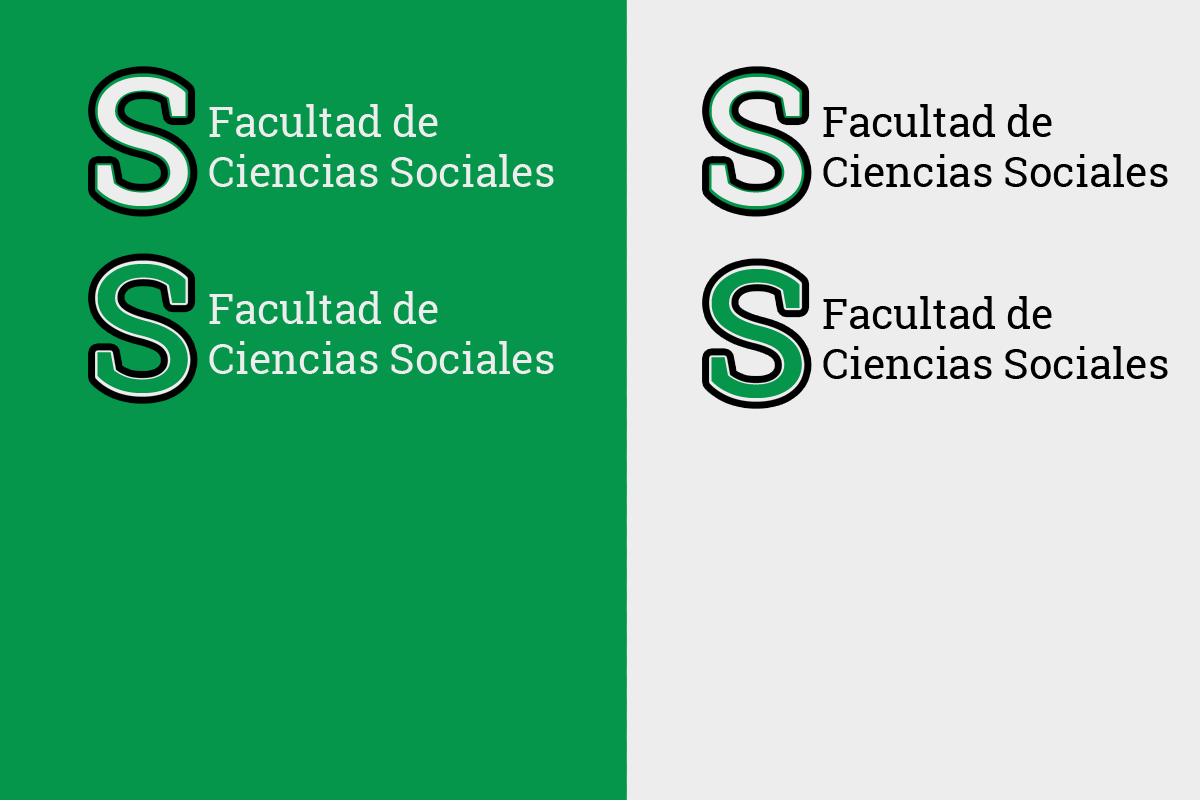
<style>
.page{position:relative;width:1200px;height:800px;background:#05954b}
.page>*{position:absolute;margin:0}
.t1{font:178.9px "RobotoSlab-Regular";color:#ededed}
.t2{font:41.9px "RobotoSlab-Regular";color:#ededed}
.t3{font:41.9px "RobotoSlab-Regular";color:#000000}
.t4{font:178.9px "RobotoSlab-Regular";color:#04954a}
</style>
<div class="page">
<p class="t1" style="left:97px;top:77px;width:91px;height:129px">S</p>
<p class="t1" style="left:711px;top:77px;width:91px;height:129px">S</p>
<p class="t2" style="left:209px;top:104px;width:345px;height:83px">Facultad de<br>Ciencias Sociales</p>
<p class="t3" style="left:823px;top:104px;width:345px;height:83px">Facultad de<br>Ciencias Sociales</p>
<p class="t4" style="left:97px;top:264px;width:91px;height:129px">S</p>
<p class="t4" style="left:711px;top:269px;width:91px;height:129px">S</p>
<p class="t2" style="left:209px;top:291px;width:345px;height:83px">Facultad de<br>Ciencias Sociales</p>
<p class="t3" style="left:823px;top:296px;width:345px;height:83px">Facultad de<br>Ciencias Sociales</p>
</div>
